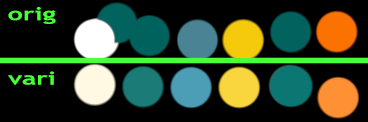
<style>
.page{position:relative;width:368px;height:122px;background:#000000}
.page>*{position:absolute;margin:0}
.t1{font:18px "TrebuchetMS-Bold";color:#48ff3a;scale:1.49 1}
</style>
<div class="page">
<p class="t1" style="left:8px;top:7px;width:48px;height:17px">orig</p>
<p class="t1" style="left:8px;top:71px;width:46px;height:14px">vari</p>
</div>
